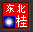
<style>
.page{position:relative;width:33px;height:32px;background:#f20000}
.page>*{position:absolute;margin:0}
.t1{font:10.4px "SimSun";color:#ffffff}
.t2{font:11.7px "SimSun";color:#ffffff}
</style>
<div class="page">
<p class="t1" style="left:6px;top:4px;width:19px;height:9px">东北</p>
<p class="t2" style="left:16px;top:15px;width:11px;height:12px">桂</p>
</div>
